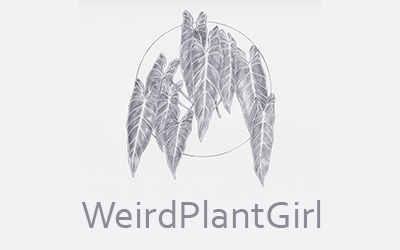
<style>
.page{position:relative;width:400px;height:250px;background:#f3f1f3}
.page>*{position:absolute;margin:0}
.t1{font:40px "Corbel";color:#8e8a95}
</style>
<div class="page">
<p class="t1" style="left:81px;top:200px;width:240px;height:28px">WeirdPlantGirl</p>
</div>
